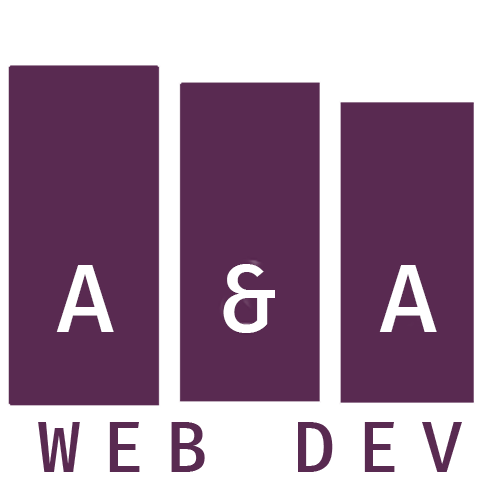
<style>
.page{position:relative;width:500px;height:500px;background:#592a51}
.page>*{position:absolute;margin:0}
.t1{font:71.2px "FiraCode-Medium";color:#ffffff}
.t2{font:52.2px "FiraCode-Medium";letter-spacing:0.32em;color:#592a51}
</style>
<div class="page">
<p class="t1" style="left:56px;top:265px;width:58px;height:67px">A</p>
<p class="t1" style="left:223px;top:264px;width:52px;height:69px">&amp;</p>
<p class="t1" style="left:379px;top:265px;width:58px;height:67px">A</p>
<p class="t2" style="left:38px;top:422px;width:424px;height:50px">WEB DEV</p>
</div>
